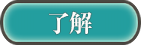
<style>
.page{position:relative;width:141px;height:45px;background:#239e9f}
.page>*{position:absolute;margin:0}
.t1{font:24px "RyuminPro-ExBold";color:#fdfbf9}
</style>
<div class="page">
<p class="t1" style="left:49px;top:11px;width:43px;height:24px">了解</p>
</div>
